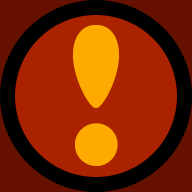
<style>
.page{position:relative;width:192px;height:192px;background:#aa2200}
.page>*{position:absolute;margin:0}
.t1{font:192px "CooperBlackStd";color:#ffaa00}
</style>
<div class="page">
<p class="t1" style="left:73px;top:25px;width:46px;height:141px">!</p>
</div>
